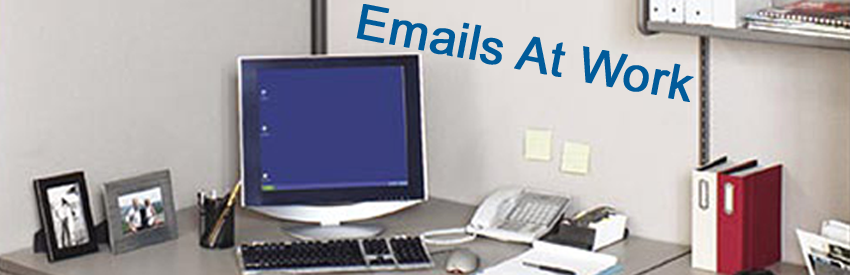
<style>
.page{position:relative;width:850px;height:275px}
.page>*{position:absolute;margin:0}
.t1{font:48px "ArialMT";color:#005b9a;font-weight:bold}
</style>
<div class="page">
<p class="t1" style="left:356px;top:4px;width:338px;height:98px;rotate:11deg">Emails At Work</p>
</div>
